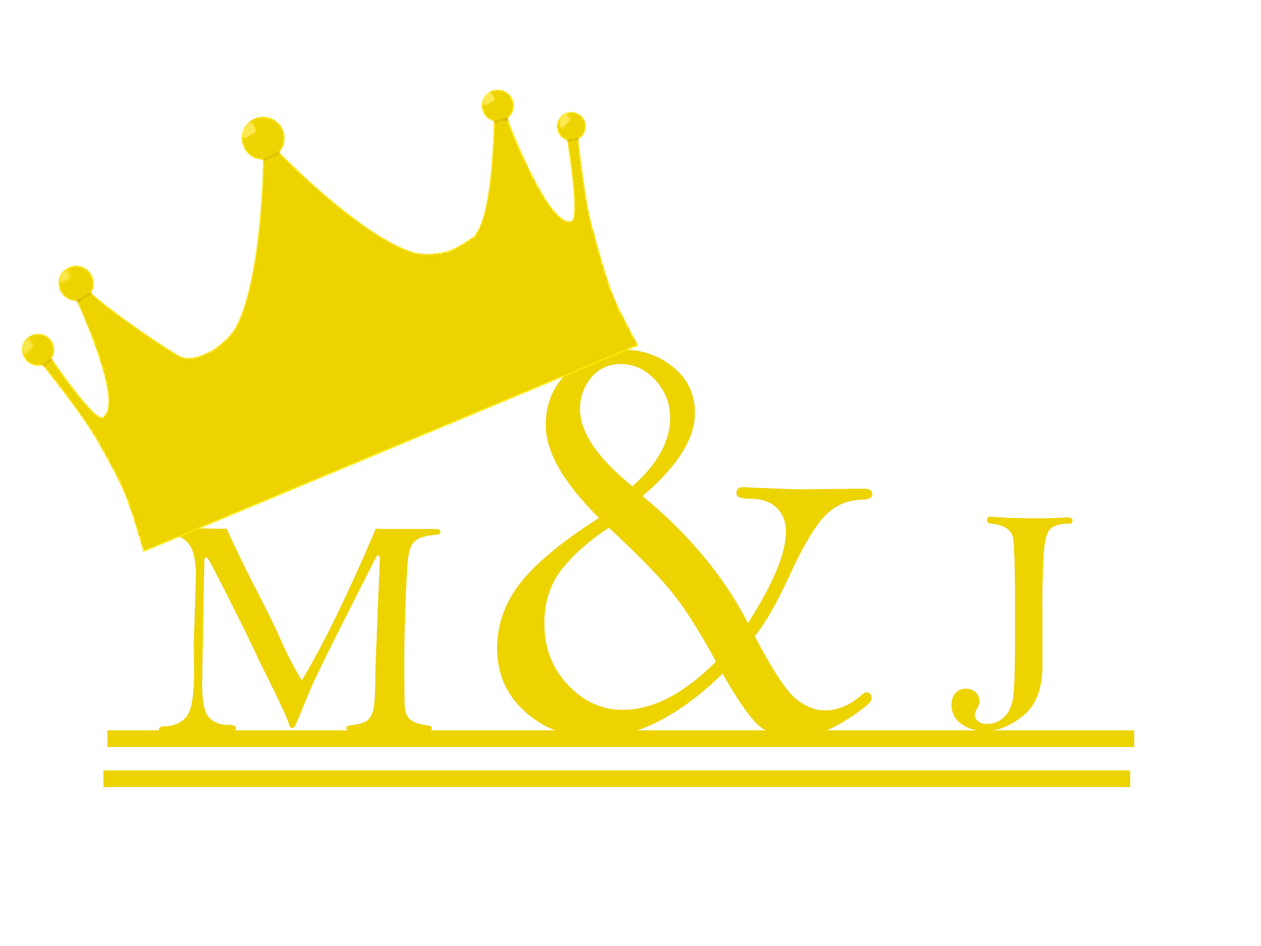
<style>
.page{position:relative;width:1261px;height:946px;background:#ffffff}
.page>*{position:absolute;margin:0}
.t1{font:603.5px "BellMT";color:#edd400}
.t2{font:329.8px "BellMT";color:#edd400}
.t3{font:315.4px "BellMT";color:#edd400}
</style>
<div class="page">
<p class="t1" style="left:497px;top:350px;width:376px;height:387px">&amp;</p>
<p class="t2" style="left:952px;top:516px;width:121px;height:215px">J</p>
<p class="t3" style="left:159px;top:527px;width:281px;height:205px">M</p>
</div>
